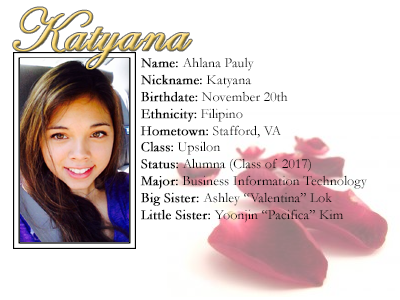
<style>
.page{position:relative;width:400px;height:300px;background:#ffffff}
.page>*{position:absolute;margin:0}
.t1{font:60px "EdwardianScriptITC";font-weight:bold}
.t2{font:14px "Garamond";color:#000000}
.t3{font:14px "Garamond";color:#000000;font-weight:bold}
</style>
<div class="page">
<p class="t1" style="left:13px;top:7px;width:179px;height:63px">Katyana</p>
<p class="t2" style="left:140px;top:57px;width:227px;height:166px"><span class="t3">Name: </span>Ahlana Pauly<br><span class="t3">Nickname:</span> Katyana<br><span class="t3">Birthdate:</span> November 20th<br><span class="t3">Ethnicity:</span> Filipino<br><span class="t3">Hometown:</span> Stafford, VA<br><span class="t3">Class:</span> Upsilon<br><span class="t3">Status:</span> Alumna (Class of 2017)<br><span class="t3">Major:</span> Business Information Technology<br><span class="t3">Big Sister: </span>Ashley “Valentina” Lok<br><span class="t3">Little Sister: </span>Yoonjin “Pacifica” Kim</p>
</div>
